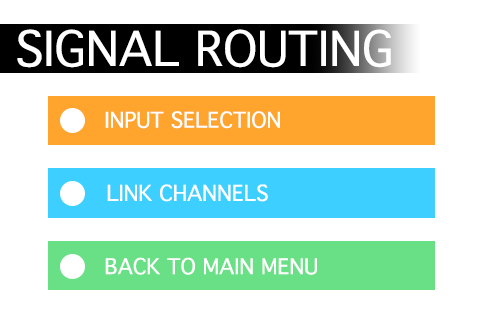
<style>
.page{position:relative;width:480px;height:320px;background:#ffffff}
.page>*{position:absolute;margin:0}
.t1{font:46.4px "Thonburi";color:#ffffff}
.t2{font:20.8px "Thonburi";color:#ffffff}
</style>
<div class="page">
<p class="t1" style="left:17px;top:29px;width:374px;height:39px">SIGNAL ROUTING</p>
<p class="t2" style="left:105px;top:111px;width:175px;height:18px">INPUT SELECTION</p>
<p class="t2" style="left:107px;top:184px;width:161px;height:18px">LINK CHANNELS</p>
<p class="t2" style="left:105px;top:257px;width:212px;height:18px">BACK TO MAIN MENU</p>
</div>
